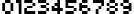
<style>
.page{position:relative;width:134px;height:14px;background:#ffffff}
.page>*{position:absolute;margin:0}
.t1{font:22px "04b03";color:#000000}
</style>
<div class="page">
<p class="t1" style="left:2px;top:0px;width:130px;height:14px">0123456789</p>
</div>
